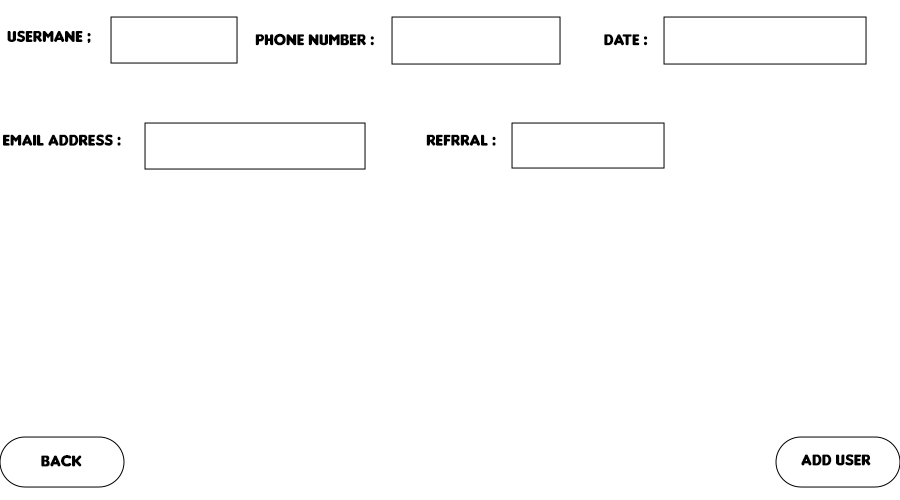
<style>
.page{position:relative;width:900px;height:500px;background:#ffffff}
.page>*{position:absolute;margin:0}
.t1{font:16.7px "Insaniburger";color:#000000}
</style>
<div class="page">
<p class="t1" style="left:7px;top:30px;width:84px;height:13px">usermane ;</p>
<p class="t1" style="left:255px;top:33px;width:119px;height:13px">phone number :</p>
<p class="t1" style="left:604px;top:34px;width:44px;height:12px">Date :</p>
<p class="t1" style="left:3px;top:134px;width:118px;height:12px">Email Address :</p>
<p class="t1" style="left:426px;top:134px;width:70px;height:12px">refrral :</p>
<p class="t1" style="left:41px;top:455px;width:41px;height:12px">Back</p>
<p class="t1" style="left:801px;top:454px;width:70px;height:12px">ADD user</p>
</div>
